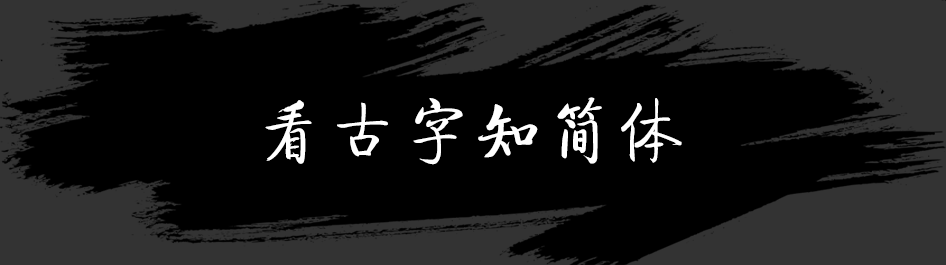
<style>
.page{position:relative;width:946px;height:265px;background:#000000}
.page>*{position:absolute;margin:0}
.t1{font:72px "FZQTJW--GB1-0";color:#ffffff}
</style>
<div class="page">
<p class="t1" style="left:265px;top:97px;width:417px;height:68px">看古字知简体</p>
</div>
